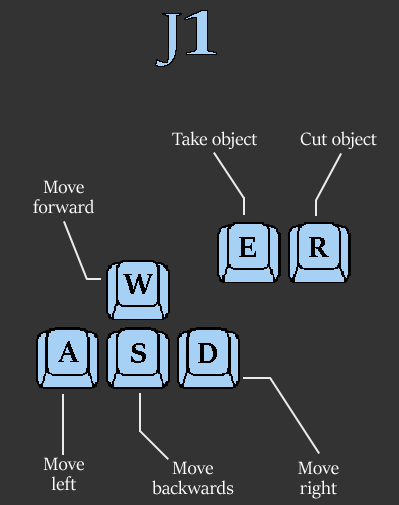
<style>
.page{position:relative;width:399px;height:505px;background:#333333}
.page>*{position:absolute;margin:0}
.t1{font:20px "SitkaBanner";color:#ffffff}
.t2{font:20px/20px "SitkaBanner";color:#ffffff}
.t3{font:33px "SitkaBanner-Bold";color:#000000}
</style>
<div class="page">
<p class="t1" style="left:172px;top:131px;width:86px;height:18px">Take object</p>
<p class="t1" style="left:300px;top:131px;width:77px;height:18px">Cut object</p>
<p class="t2" style="left:33px;top:180px;width:62px;height:34px;text-align:center">Move<br>forward</p>
<p class="t3" style="left:239px;top:237px;width:17px;height:20px">E</p>
<p class="t3" style="left:309px;top:237px;width:20px;height:20px">R</p>
<p class="t3" style="left:123px;top:274px;width:30px;height:20px">W</p>
<p class="t3" style="left:58px;top:341px;width:21px;height:21px">A</p>
<p class="t3" style="left:131px;top:343px;width:15px;height:20px">S</p>
<p class="t3" style="left:198px;top:343px;width:19px;height:20px">D</p>
<p class="t2" style="left:43px;top:457px;width:41px;height:34px;text-align:center">Move<br>left</p>
<p class="t2" style="left:152px;top:461px;width:82px;height:34px;text-align:center">Move<br>backwards</p>
<p class="t2" style="left:298px;top:461px;width:41px;height:38px;text-align:center">Move<br>right</p>
</div>
